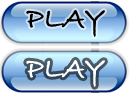
<style>
.page{position:relative;width:132px;height:101px}
.page>*{position:absolute;margin:0}
.t1{font:30px "BradleyHandITCTT-Bold";color:#000000}
.t2{font:30px "BradleyHandITCTT-Bold";color:#ffffff}
</style>
<div class="page">
<p class="t1" style="left:26px;top:9px;width:79px;height:28px">PLAY</p>
<p class="t2" style="left:26px;top:59px;width:79px;height:28px">PLAY</p>
</div>
